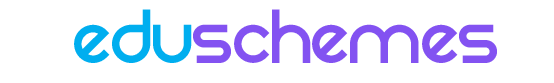
<style>
.page{position:relative;width:554px;height:83px;background:#ffffff}
.page>*{position:absolute;margin:0}
.t1{font:85px "REZ";color:#8352f1}
.t2{font:85px "REZ";color:#00aeef}
</style>
<div class="page">
<p class="t1" style="left:74px;top:9px;width:423px;height:54px"><span class="t2">EDU</span>SCHEMES</p>
</div>
